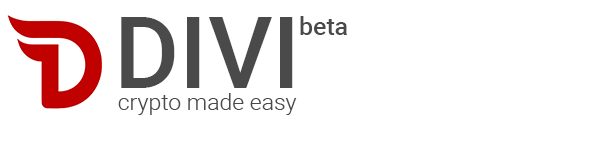
<style>
.page{position:relative;width:600px;height:150px;background:#ffffff}
.page>*{position:absolute;margin:0}
.t1{font:100px "Roboto-Medium";color:#4a4a4a}
.t2{font:25px "Roboto-Medium";color:#4a4a4a}
.t3{font:23px "Roboto-Light";color:#4a4a4a}
</style>
<div class="page">
<p class="t1" style="left:121px;top:17px;width:172px;height:71px">DIVI</p>
<p class="t2" style="left:300px;top:16px;width:47px;height:19px">beta</p>
<p class="t3" style="left:118px;top:93px;width:179px;height:22px">crypto made easy</p>
</div>
